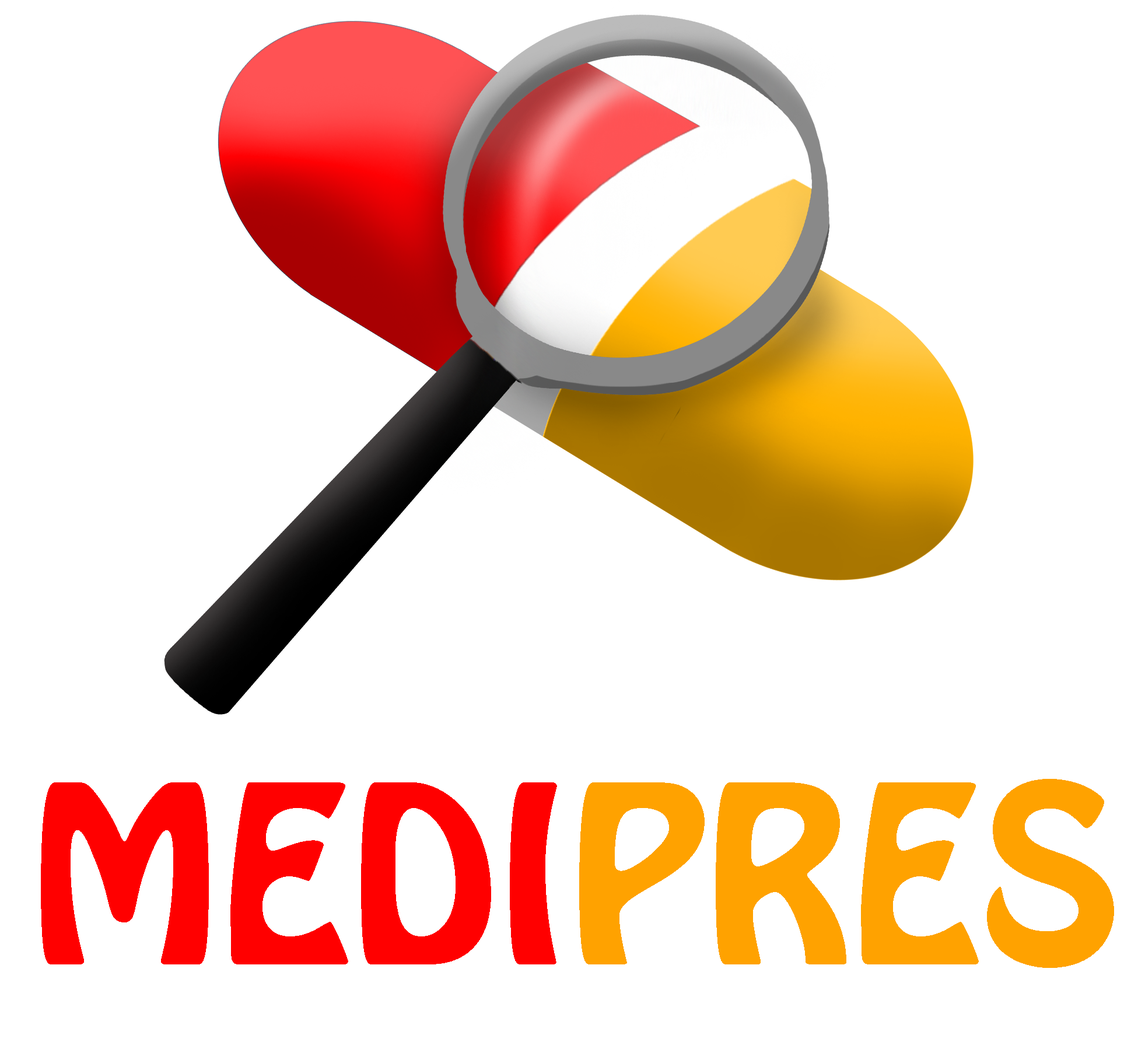
<style>
.page{position:relative;width:1145px;height:1042px;background:#ffffff}
.page>*{position:absolute;margin:0}
.t1{font:218.7px "HoboStd";color:#ff0000}
.t2{font:218.7px "HoboStd";color:#ffa200}
</style>
<div class="page">
<p class="t1" style="left:41px;top:779px;width:1073px;height:189px">MEDI<span class="t2">PRES</span></p>
</div>
